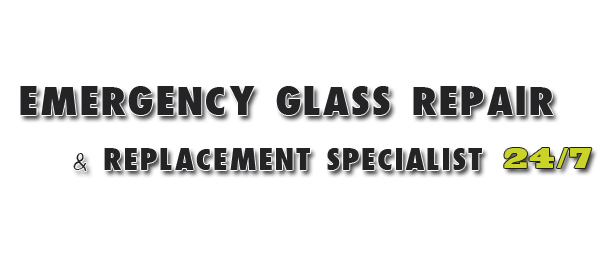
<style>
.page{position:relative;width:600px;height:280px;background:#ffffff}
.page>*{position:absolute;margin:0}
.t1{font:28.8px "-wATCHMEn";letter-spacing:0.075em;color:#242426;scale:1.13 1}
.t2{font:21.6px "-wATCHMEn";letter-spacing:0.075em;color:#242426;scale:1.13 1}
.t3{font:27px "BlackoakStd";letter-spacing:0.075em;color:#cad428;scale:0.64 1}
</style>
<div class="page">
<p class="t1" style="left:20px;top:86px;width:534px;height:29px">EMERGENCY GLASS REPAIR</p>
<p class="t2" style="left:73px;top:148px;width:409px;height:23px">&amp; REPLACEMENT SPECIALIST</p>
<p class="t3" style="left:504px;top:148px;width:88px;height:20px">24/7</p>
</div>
